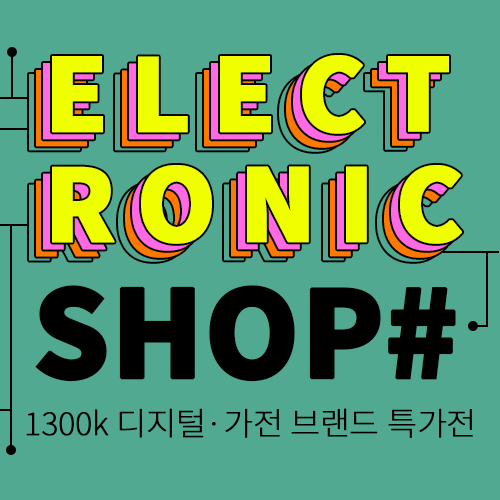
<style>
.page{position:relative;width:500px;height:500px;background:#51a991}
.page>*{position:absolute;margin:0}
.t1{font:100px/110px "NotoSansKR-Black";letter-spacing:0.2em;font-weight:bold}
.t2{font:100px/110px "NotoSansKR-Black";letter-spacing:0.2em;color:#f0ff00;font-weight:bold}
.t3{font:120px "NotoSansKR-Black";letter-spacing:-0.015em;color:#000000;font-weight:bold}
.t4{font:32px "NotoSansKR-Thin";letter-spacing:-0.015em;color:#000000;font-weight:bold}
</style>
<div class="page">
<p class="t1" style="left:43px;top:62px;width:410px;height:189px">ELECT<br>RONIC</p>
<p class="t2" style="left:52px;top:55px;width:410px;height:189px">ELECT<br>RONIC</p>
<p class="t1" style="left:36px;top:69px;width:410px;height:189px">ELECT<br>RONIC</p>
<p class="t3" style="left:35px;top:285px;width:421px;height:97px">SHOP#</p>
<p class="t4" style="left:26px;top:408px;width:447px;height:30px">1300k 디지털·가전 브랜드 특가전</p>
</div>
